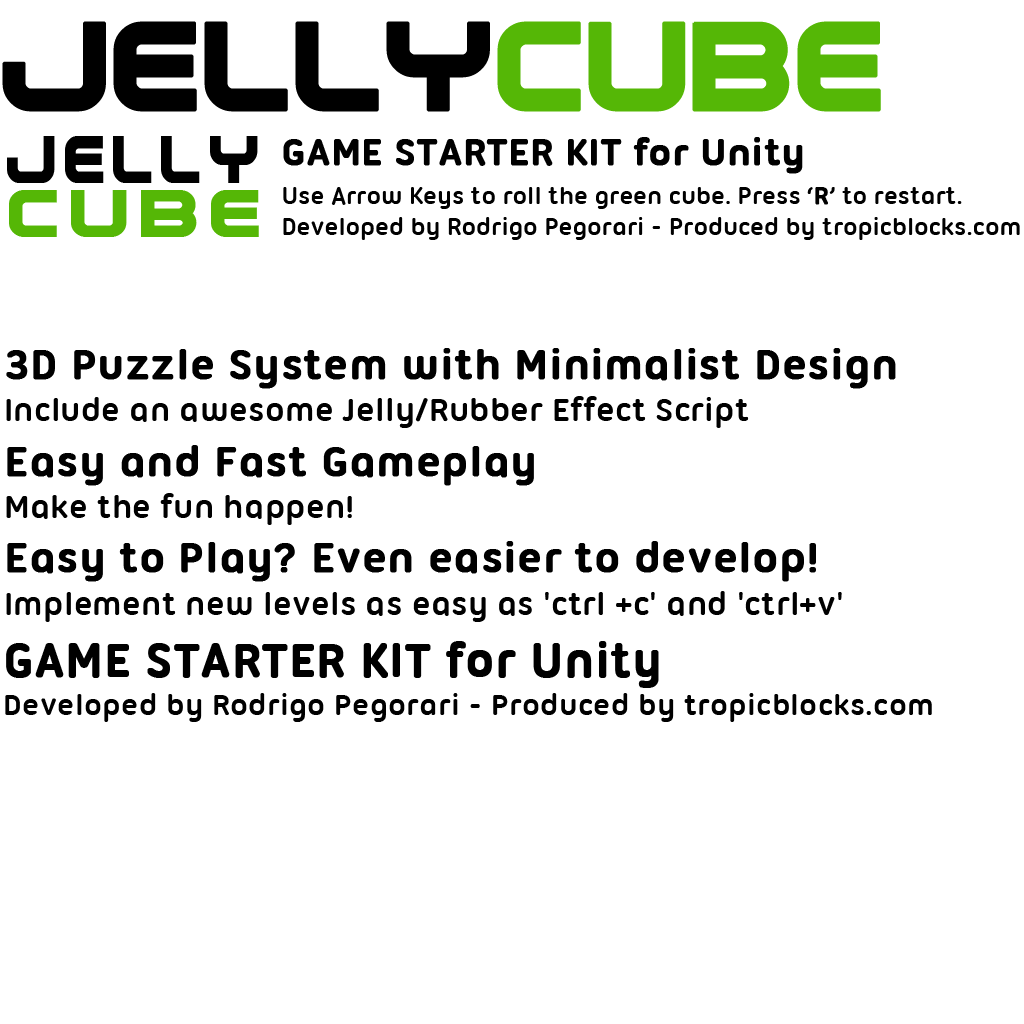
<style>
.page{position:relative;width:1024px;height:1024px;background:#ffffff}
.page>*{position:absolute;margin:0}
.t1{font:134.4px "TerminatorTwo";color:#000000;font-weight:bold}
.t2{font:134.4px "TerminatorTwo";color:#55b706;font-weight:bold}
.t3{font:69.8px "TerminatorTwo";letter-spacing:0.12em;color:#000000;font-weight:bold;scale:0.87 1}
.t4{font:25.8px "UbuntuTitling-Bold";color:#000000}
.t5{font:39.9px/26.5px "UbuntuTitling-Bold";color:#000000;font-weight:bold}
.t6{font:25.8px "UbuntuTitling-Bold";color:#000000;font-weight:bold}
.t7{font:69.8px "TerminatorTwo";letter-spacing:0.14em;color:#55b706;font-weight:bold;scale:1.09 1}
.t8{font:35.3px "UbuntuTitling-Bold";color:#000000}
.t9{font:45.3px "UbuntuTitling-Bold";color:#000000;font-weight:bold}
.t10{font:32.5px "UbuntuTitling-Bold";color:#000000}
.t11{font:50.3px/33.3px "UbuntuTitling-Bold";color:#000000;font-weight:bold}
</style>
<div class="page">
<p class="t1" style="left:2px;top:21px;width:879px;height:91px">Jelly<span class="t2">cube</span></p>
<p class="t3" style="left:7px;top:136px;width:251px;height:47px">Jelly</p>
<p class="t4" style="left:283px;top:137px;width:737px;height:103px"><span class="t5">GAME STARTER KIT for Unity<br><br></span>Use Arrow Keys to roll the green cube. Press ‘<span class="t6">R</span>’ to restart.<br>Developed by Rodrigo Pegorari - Produced by tropicblocks.com</p>
<p class="t7" style="left:9px;top:190px;width:250px;height:47px">cube</p>
<p class="t8" style="left:6px;top:348px;width:890px;height:274px"><span class="t9">3D Puzzle System with Minimalist Design<br></span>Include an awesome Jelly/Rubber Effect Script<br><span class="t9">Easy and Fast Gameplay<br></span>Make the fun happen!<br><span class="t9">Easy to Play? Even easier to develop!<br></span>Implement new levels as easy as 'ctrl +c' and 'ctrl+v'</p>
<p class="t10" style="left:5px;top:641px;width:927px;height:81px"><span class="t11">GAME STARTER KIT for Unity<br></span>Developed by Rodrigo Pegorari - Produced by tropicblocks.com</p>
</div>
